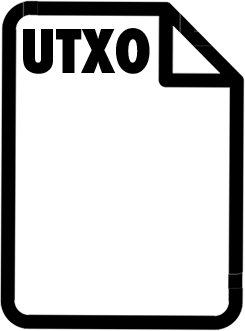
<style>
.page{position:relative;width:245px;height:331px;background:#ffffff}
.page>*{position:absolute;margin:0}
.t1{font:58.5px "Futura-CondensedExtraBold";color:#010101}
</style>
<div class="page">
<p class="t1" style="left:23px;top:28px;width:127px;height:46px">UTXO</p>
</div>
